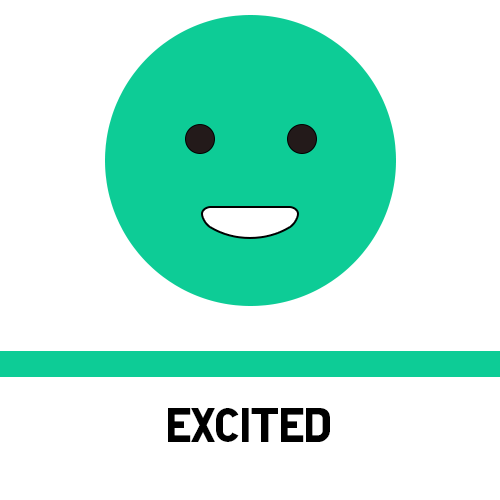
<style>
.page{position:relative;width:500px;height:500px;background:#ffffff}
.page>*{position:absolute;margin:0}
.t1{font:48px "HotelDeParisXe";color:#000000}
</style>
<div class="page">
<p class="t1" style="left:168px;top:408px;width:162px;height:34px">excited</p>
</div>
